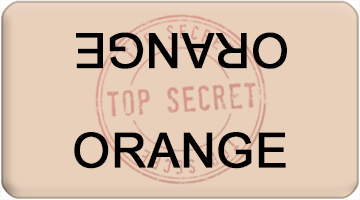
<style>
.page{position:relative;width:360px;height:200px;background:#e8d0bb}
.page>*{position:absolute;margin:0}
.t1{font:48px "ArialMT";color:#000000;font-weight:bold}
</style>
<div class="page">
<p class="t1" style="left:76px;top:32px;width:211px;height:37px;rotate:180deg">ORANGE</p>
<p class="t1" style="left:74px;top:132px;width:212px;height:37px">ORANGE</p>
</div>
